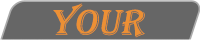
<style>
.page{position:relative;width:200px;height:40px;background:#666666}
.page>*{position:absolute;margin:0}
.t1{font:36.9px "Algerian";color:#ec9035;font-style:italic}
</style>
<div class="page">
<p class="t1" style="left:53px;top:3px;width:92px;height:35px">Your</p>
</div>
